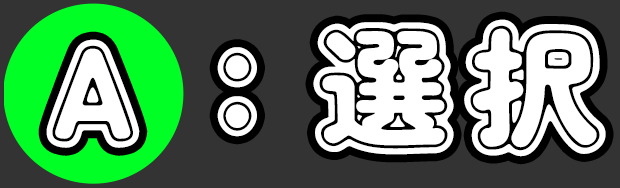
<style>
.page{position:relative;width:620px;height:188px;background:#333333}
.page>*{position:absolute;margin:0}
.t1{font:150px "DokiDokiFantasia";color:#ffffff}
</style>
<div class="page">
<p class="t1" style="left:217px;top:19px;width:389px;height:138px">：選択</p>
</div>
